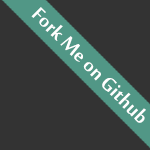
<style>
.page{position:relative;width:150px;height:150px;background:#333333}
.page>*{position:absolute;margin:0}
.t1{font:29.2px "MoolBoran";color:#ffffff}
</style>
<div class="page">
<p class="t1" style="left:31px;top:7px;width:115px;height:116px;rotate:45deg">Fork Me on Github</p>
</div>
